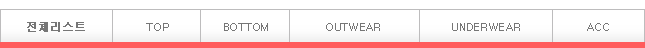
<style>
.page{position:relative;width:645px;height:48px;background:#ffffff}
.page>*{position:absolute;margin:0}
.t1{font:11px "Dotum";color:#767676;font-weight:bold}
.t2{font:11px "Dotum";letter-spacing:-0.025em;color:#767676}
</style>
<div class="page">
<p class="t1" style="left:27px;top:22px;width:58px;height:10px">전체리스트</p>
<p class="t2" style="left:146px;top:23px;width:23px;height:8px">TOP</p>
<p class="t2" style="left:224px;top:23px;width:44px;height:8px">BOTTOM</p>
<p class="t2" style="left:326px;top:23px;width:54px;height:8px">OUTWEAR</p>
<p class="t2" style="left:452px;top:23px;width:68px;height:8px">UNDERWEAR</p>
<p class="t2" style="left:587px;top:23px;width:22px;height:8px">ACC</p>
</div>
